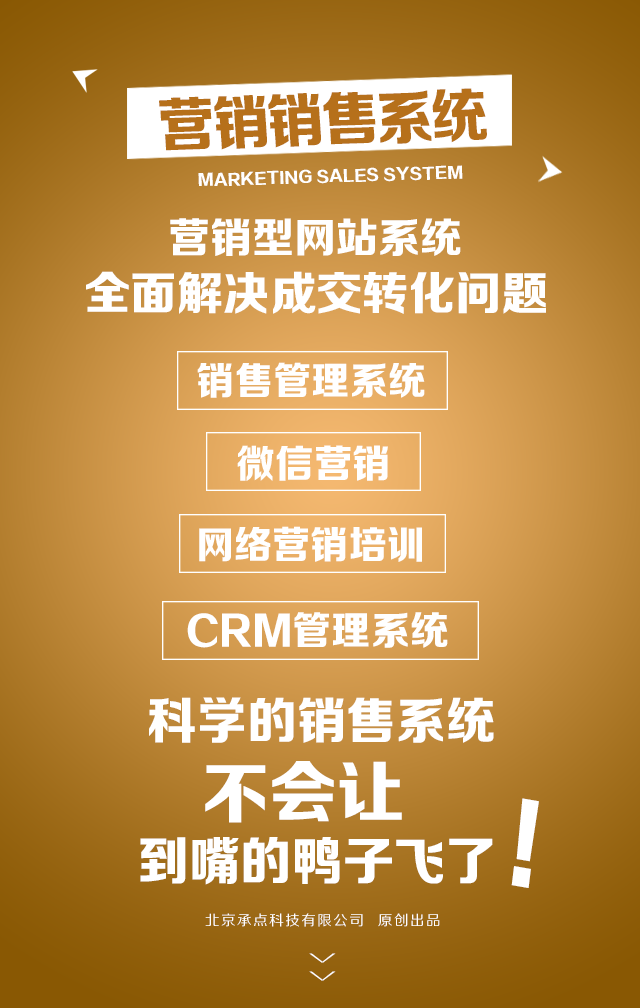
<style>
.page{position:relative;width:640px;height:1008px}
.page>*{position:absolute;margin:0}
.t1{font:59.2px "FZZDHJW--GB1-0";letter-spacing:-0.05em;color:#b6701b;text-transform:uppercase}
.t2{font:15.6px "FZZDHJW--GB1-0";letter-spacing:0.005em;color:#ffffff;text-transform:uppercase}
.t3{font:41.8px "FZZDHJW--GB1-0";color:#ffffff;text-transform:uppercase}
.t4{font:46px "FZZDHJW--GB1-0";color:#ffffff;text-transform:uppercase}
.t5{font:38.8px "FZZDHJW--GB1-0";letter-spacing:0.005em;color:#ffffff;text-transform:uppercase}
.t6{font:39px "FZZDHJW--GB1-0";letter-spacing:0.005em;color:#ffffff;text-transform:uppercase}
.t7{font:38.6px "FZZDHJW--GB1-0";letter-spacing:0.005em;color:#ffffff;text-transform:uppercase}
.t8{font:39.6px "FZZDHJW--GB1-0";letter-spacing:0.005em;color:#ffffff;text-transform:uppercase}
.t9{font:50.2px "FZZDHJW--GB1-0";color:#ffffff;text-transform:uppercase}
.t10{font:67.8px "FZZDHJW--GB1-0";color:#ffffff;text-transform:uppercase}
.t11{font:103.3px "FZZDHJW--GB1-0";letter-spacing:0.005em;color:#ffffff;text-transform:uppercase;scale:0.85 1}
.t12{font:52.2px "FZZDHJW--GB1-0";color:#ffffff;text-transform:uppercase}
.t13{font:14.2px "FZZHJW--GB1-0";letter-spacing:0.1em;color:#ffffff;text-transform:uppercase}
.t14{font:36.8px "FZZXHJW--GB1-0";letter-spacing:0.5em;color:#ffffff;text-transform:uppercase;scale:0.44 1}
</style>
<div class="page">
<p class="t1" style="left:159px;top:88px;width:328px;height:63px;rotate:-2deg">营销销售系统</p>
<p class="t2" style="left:198px;top:165px;width:265px;height:21px;rotate:-2deg">Marketing sales system</p>
<p class="t3" style="left:170px;top:218px;width:291px;height:38px">营销型网站系统</p>
<p class="t4" style="left:86px;top:271px;width:460px;height:43px">全面解决成交转化问题</p>
<p class="t5" style="left:197px;top:362px;width:228px;height:36px">销售管理系统</p>
<p class="t6" style="left:237px;top:445px;width:151px;height:36px">微信营销</p>
<p class="t7" style="left:199px;top:526px;width:223px;height:36px">网络营销培训</p>
<p class="t8" style="left:187px;top:612px;width:261px;height:36px">CRM管理系统</p>
<p class="t9" style="left:149px;top:697px;width:345px;height:46px">科学的销售系统</p>
<p class="t10" style="left:205px;top:761px;width:197px;height:62px">不会让</p>
<p class="t11" style="left:511px;top:798px;width:28px;height:90px;rotate:10deg">!</p>
<p class="t12" style="left:140px;top:837px;width:353px;height:48px">到嘴的鸭子飞了</p>
<p class="t13" style="left:205px;top:913px;width:235px;height:14px">北京承点科技有限公司  原创出品</p>
<p class="t14" style="left:309px;top:953px;width:27px;height:28px;rotate:90deg">&gt;&gt;</p>
</div>
